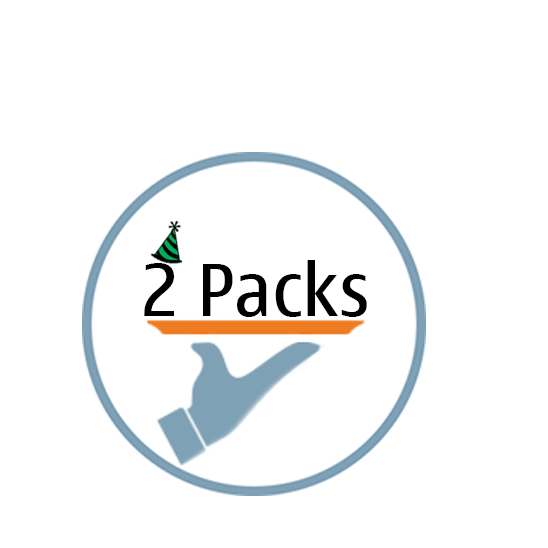
<style>
.page{position:relative;width:548px;height:548px;background:#ffffff}
.page>*{position:absolute;margin:0}
.t1{font:72px "NokiaStandardMultiscript";color:#000000}
</style>
<div class="page">
<p class="t1" style="left:144px;top:260px;width:223px;height:57px">2 Packs</p>
</div>
